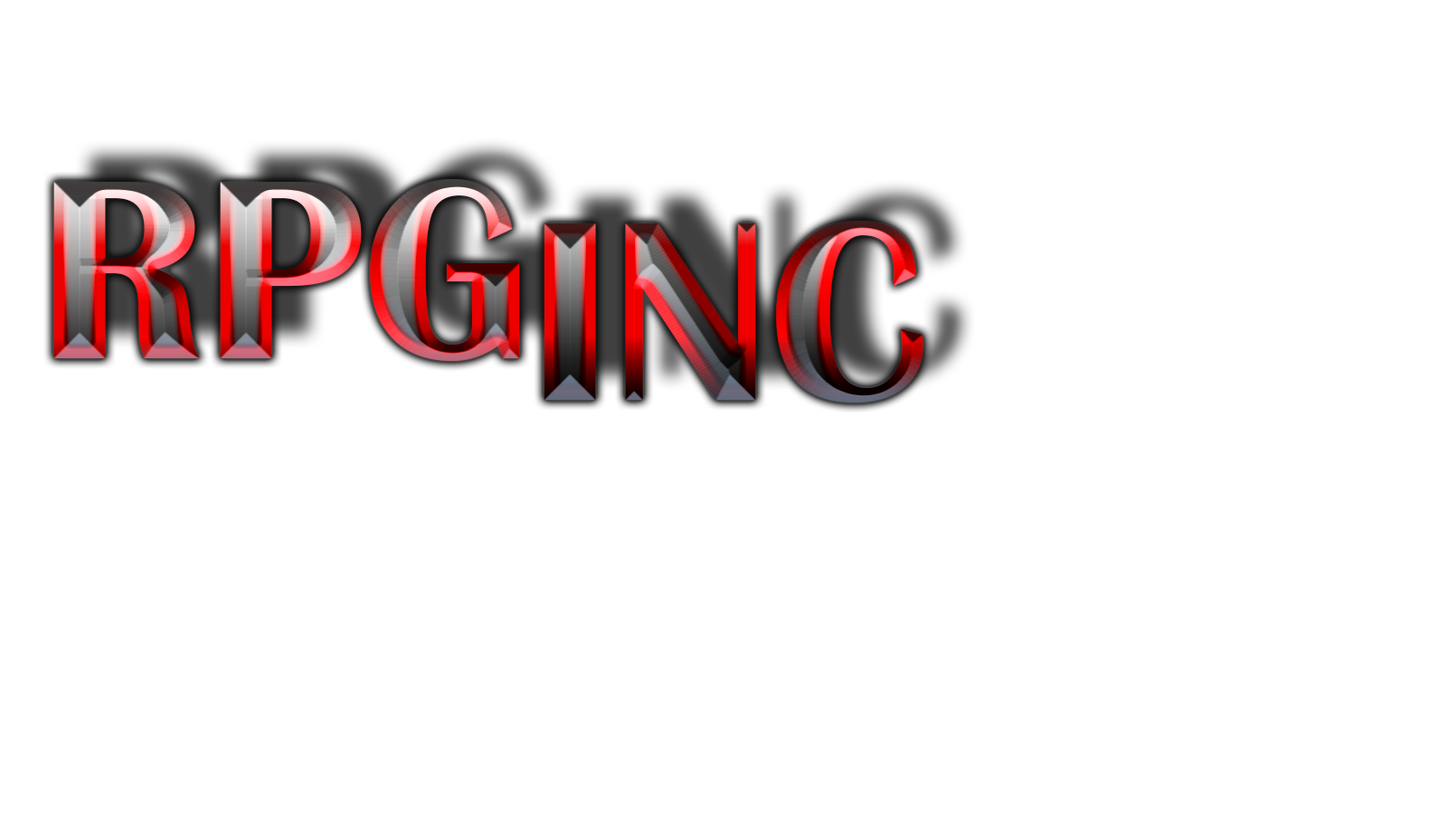
<style>
.page{position:relative;width:1429px;height:834px;background:#ffffff}
.page>*{position:absolute;margin:0}
.t1{font:263.9px "BritannicBold"}
</style>
<div class="page">
<p class="t1" style="left:53px;top:179px;width:871px;height:224px">RPGINC</p>
</div>
